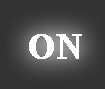
<style>
.page{position:relative;width:105px;height:89px;background:#333333}
.page>*{position:absolute;margin:0}
.t1{font:52px "BodoniSvtyTwoSCITCTT-Book";color:#ffffff;font-weight:bold}
</style>
<div class="page">
<p class="t1" style="left:29px;top:34px;width:53px;height:25px">on</p>
</div>
